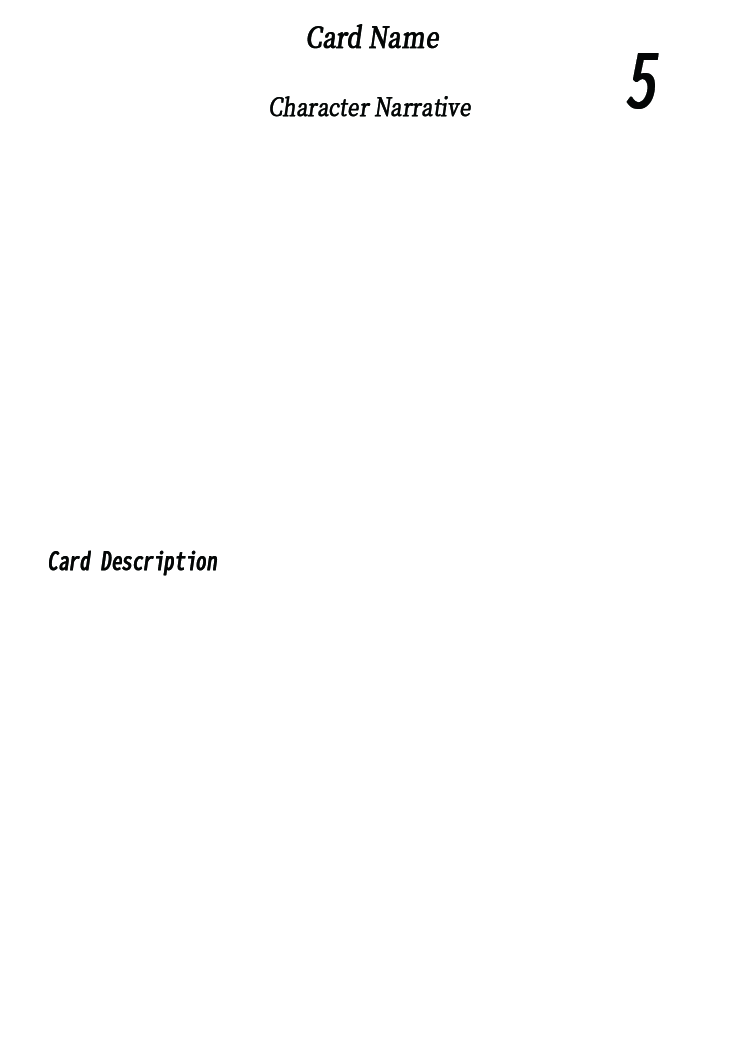
<style>
.page{position:relative;width:744px;height:1039px;background:#ffffff}
.page>*{position:absolute;margin:0}
.t1{font:29.2px "NotoSerifCJKtc-Medium";color:#040606;font-weight:bold;font-style:italic;scale:0.8 1}
.t2{font:75px "NotoSansMonoCJKtc-Regular";color:#040606;font-weight:bold;font-style:italic;scale:0.8 1}
.t3{font:25px "NotoSerifCJKtc-Light";color:#040606;font-weight:bold;font-style:italic;scale:0.8 1}
.t4{font:25px "NotoSansMonoCJKtc-Regular";color:#040606;font-weight:bold;font-style:italic;scale:0.8 1}
</style>
<div class="page">
<p class="t1" style="left:307px;top:24px;width:133px;height:25px">Card Name</p>
<p class="t2" style="left:626px;top:53px;width:33px;height:56px">5</p>
<p class="t3" style="left:270px;top:96px;width:201px;height:21px">Character Narrative</p>
<p class="t4" style="left:49px;top:550px;width:169px;height:26px">Card Description</p>
</div>
